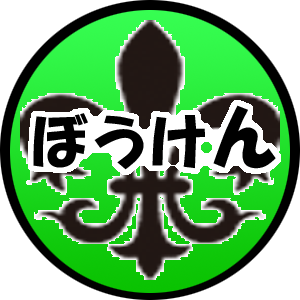
<style>
.page{position:relative;width:300px;height:300px;background:#ffffff}
.page>*{position:absolute;margin:0}
.t1{font:60px "HGSoeiKakupoptai";color:#000000}
.t2{font:72px "HGSoeiKakupoptai";color:#000000}
</style>
<div class="page">
<p class="t1" style="left:33px;top:105px;width:243px;height:65px">ぼうけ<span class="t2">ん</span></p>
</div>
